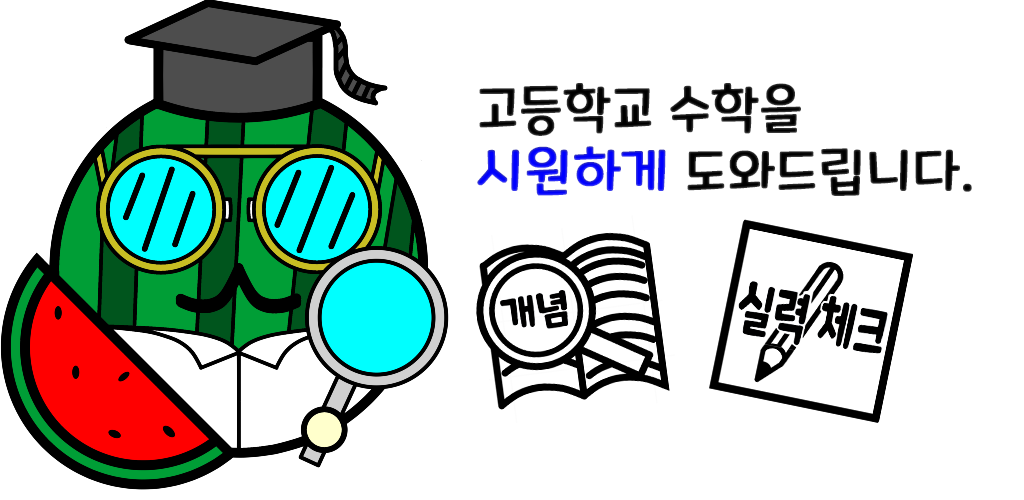
<style>
.page{position:relative;width:1024px;height:500px;background:#ffffff}
.page>*{position:absolute;margin:0}
.t1{font:52.6px/63.1px "MaplestoryLight";color:#000000;font-weight:bold}
.t2{font:52.6px/63.1px "MaplestoryLight";color:#0000ff;font-weight:bold}
</style>
<div class="page">
<p class="t1" style="left:477px;top:83px;width:495px;height:113px">고등학교 수학을 <br><span class="t2">시원하게</span> 도와드립니다.</p>
</div>
